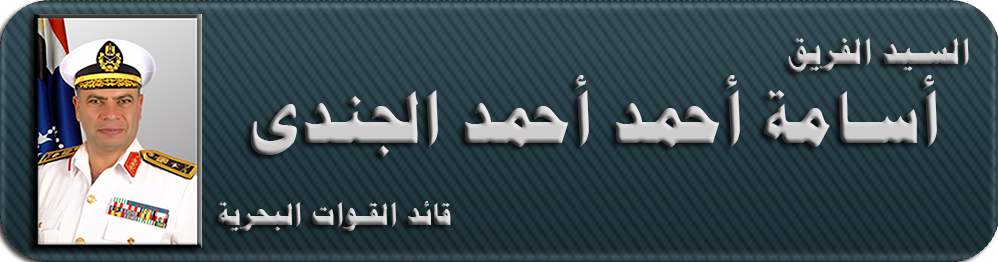
<style>
.page{position:relative;width:998px;height:262px}
.page>*{position:absolute;margin:0}
.t1{font:70px/79px "PTBoldHeading";letter-spacing:0.04em;color:#cecccc}
.t2{font:35px/79px "PTBoldHeading";letter-spacing:0.04em;color:#cecccc}
.t3{font:30px/41px "PTBoldHeading";letter-spacing:0.04em;color:#cecccc}
</style>
<div class="page">
<p class="t1" style="left:218px;top:38px;width:751px;height:193px;text-align:right"><span class="t2">السيد الفريق<br></span>أسامة أحمد أحمد الجندى<br><span class="t3"><br>قائد القوات البحرية</span></p>
</div>
